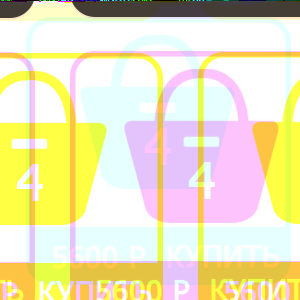
<style>
.page{position:relative;width:300px;height:300px;background:#ffffff}
.page>*{position:absolute;margin:0}
.t1{font:49.9px "Tahoma";text-transform:uppercase;font-weight:bold}
.t2{font:29.9px "Tahoma";color:#ffffff;text-transform:uppercase;font-weight:bold}
</style>
<div class="page">
<p class="t1" style="left:144px;top:127px;width:27px;height:37px">4</p>
<p class="t2" style="left:52px;top:245px;width:94px;height:23px">5600 р</p>
<p class="t2" style="left:167px;top:244px;width:113px;height:23px">купить</p>
</div>
